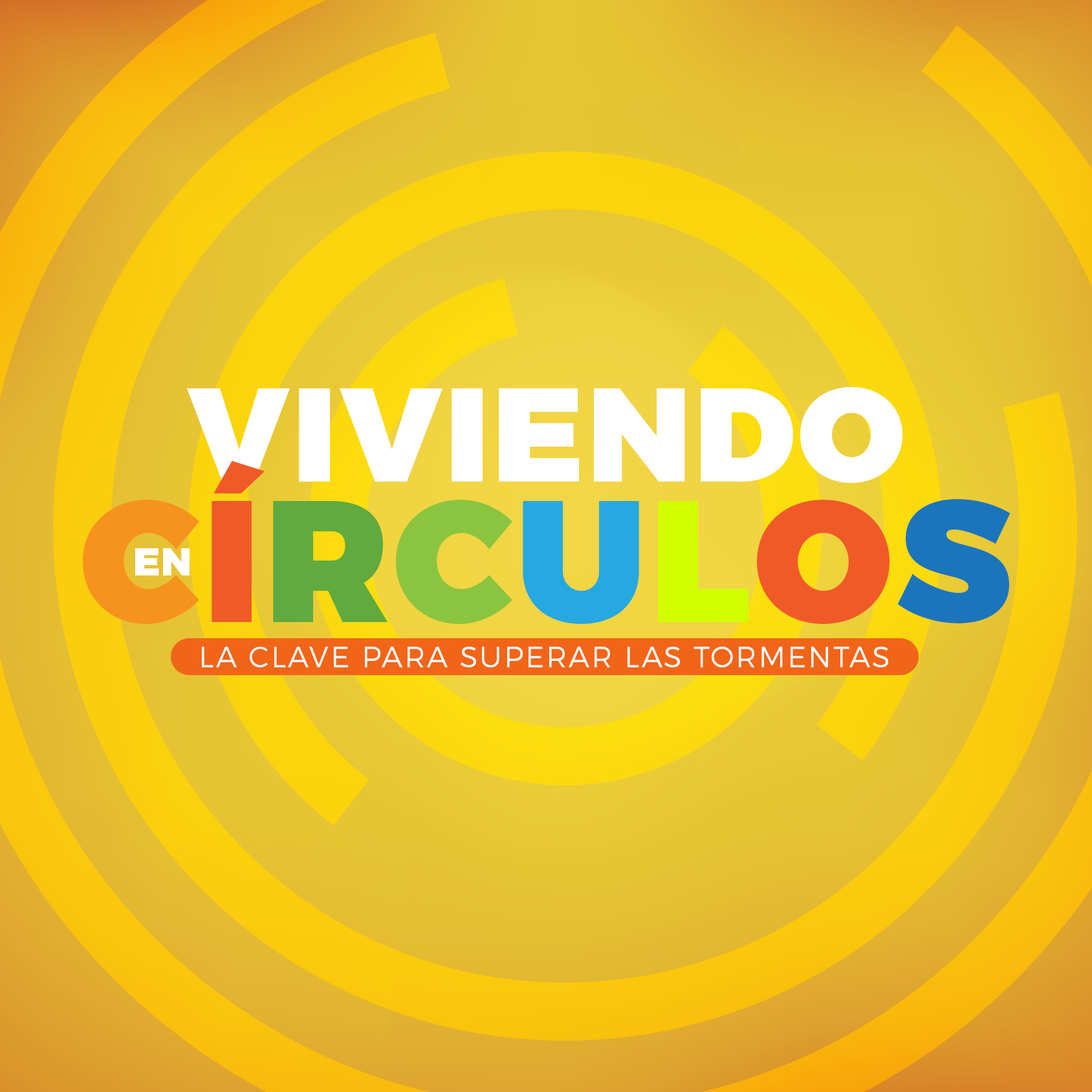
<style>
.page{position:relative;width:1092px;height:1092px}
.page>*{position:absolute;margin:0}
.t1{font:133.1px "Montserrat-Black";letter-spacing:0.025em;color:#ffffff;text-transform:uppercase}
.t2{font:172.2px "Montserrat-Black";letter-spacing:0.025em;color:#f6921e;text-transform:uppercase}
.t3{font:172.2px "Montserrat-Black";letter-spacing:0.025em;color:#f05a28;text-transform:uppercase}
.t4{font:172.2px "Montserrat-Black";letter-spacing:0.025em;color:#60aa3e;text-transform:uppercase}
.t5{font:172.2px "Montserrat-Black";letter-spacing:0.025em;color:#8bc53f;text-transform:uppercase}
.t6{font:172.2px "Montserrat-Black";letter-spacing:0.025em;color:#26a9e0;text-transform:uppercase}
.t7{font:172.2px "Montserrat-Black";letter-spacing:0.025em;color:#d2ff00;text-transform:uppercase}
.t8{font:172.2px "Montserrat-Black";letter-spacing:0.025em;color:#1b75bb;text-transform:uppercase}
.t9{font:39.1px "Montserrat-Black";letter-spacing:0.025em;color:#ffffff;text-transform:uppercase}
.t10{font:29.1px "Montserrat-Light";letter-spacing:0.065em;color:#ffffff}
</style>
<div class="page">
<p class="t1" style="left:187px;top:386px;width:716px;height:97px">Viviendo</p>
<p class="t2" style="left:83px;top:461px;width:928px;height:163px">C<span class="t3">Í</span><span class="t4">R</span><span class="t5">C</span><span class="t6">U</span><span class="t7">L</span><span class="t3">O</span><span class="t8">S</span></p>
<p class="t9" style="left:135px;top:548px;width:55px;height:27px">en</p>
<p class="t10" style="left:202px;top:646px;width:686px;height:21px">LA CLAVE PARA SUPERAR LAS TORMENTAS</p>
</div>
